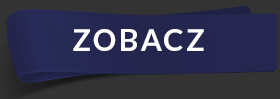
<style>
.page{position:relative;width:280px;height:99px;background:#333333}
.page>*{position:absolute;margin:0}
.t1{font:30px "Lato-Bold";letter-spacing:0.075em;color:#ffffff}
</style>
<div class="page">
<p class="t1" style="left:73px;top:29px;width:131px;height:22px">ZOBACZ</p>
</div>
